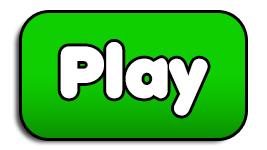
<style>
.page{position:relative;width:267px;height:150px;background:#ffffff}
.page>*{position:absolute;margin:0}
.t1{font:71.2px "Debussy";color:#ffffff}
</style>
<div class="page">
<p class="t1" style="left:60px;top:42px;width:148px;height:74px">Play</p>
</div>
